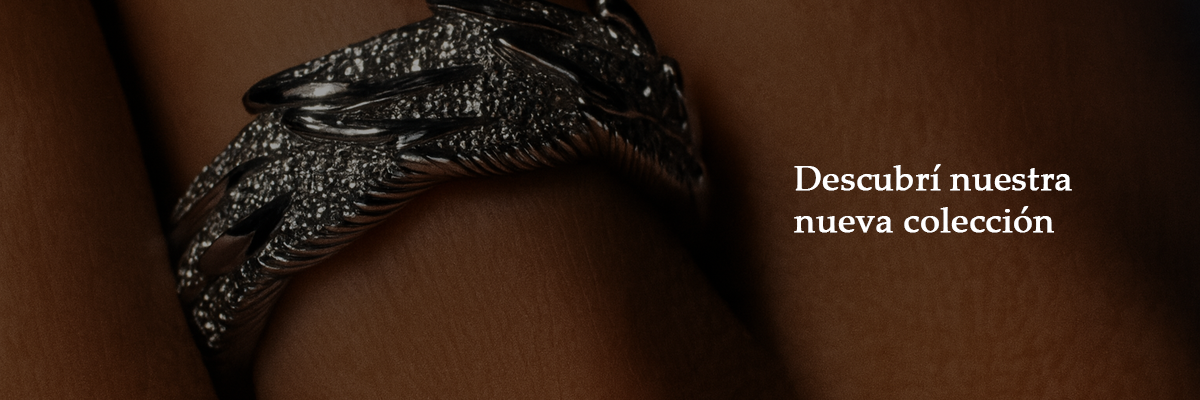
<style>
.page{position:relative;width:1200px;height:400px}
.page>*{position:absolute;margin:0}
.t1{font:35px "PalatinoLinotype-Roman";color:#ffffff;font-weight:bold}
</style>
<div class="page">
<p class="t1" style="left:794px;top:164px;width:278px;height:69px">Descubrí nuestra <br>nueva colección</p>
</div>
